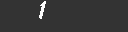
<style>
.page{position:relative;width:128px;height:32px;background:#333333}
.page>*{position:absolute;margin:0}
.t1{font:27.9px "DomDiagonalBT-Regular";letter-spacing:0.05em;color:#fbfbfb}
</style>
<div class="page">
<p class="t1" style="left:39px;top:1px;width:7px;height:18px">1</p>
</div>
